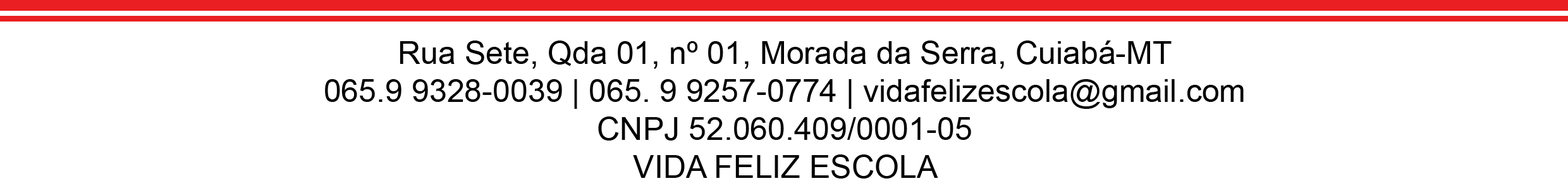
<style>
.page{position:relative;width:1568px;height:188px;background:#ffffff}
.page>*{position:absolute;margin:0}
.t1{font:31.7px "ArialMT";color:#000000}
</style>
<div class="page">
<p class="t1" style="left:325px;top:40px;width:919px;height:138px;text-align:center">Rua Sete, Qda 01, nº 01, Morada da Serra, Cuiabá-MT<br>065.9 9328-0039 | 065. 9 9257-0774 | vidafelizescola@gmail.com<br>CNPJ 52.060.409/0001-05<br>VIDA FELIZ ESCOLA</p>
</div>
